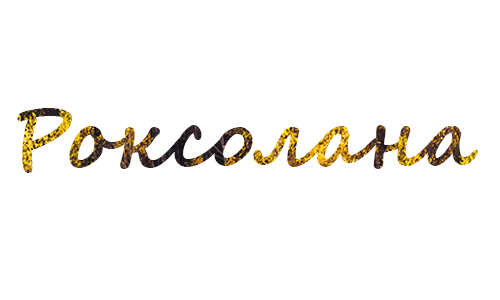
<style>
.page{position:relative;width:500px;height:300px;background:#ffffff}
.page>*{position:absolute;margin:0}
.t1{font:80.9px "SegoeScript-Bold"}
</style>
<div class="page">
<p class="t1" style="left:17px;top:108px;width:461px;height:65px">Роксолана</p>
</div>
